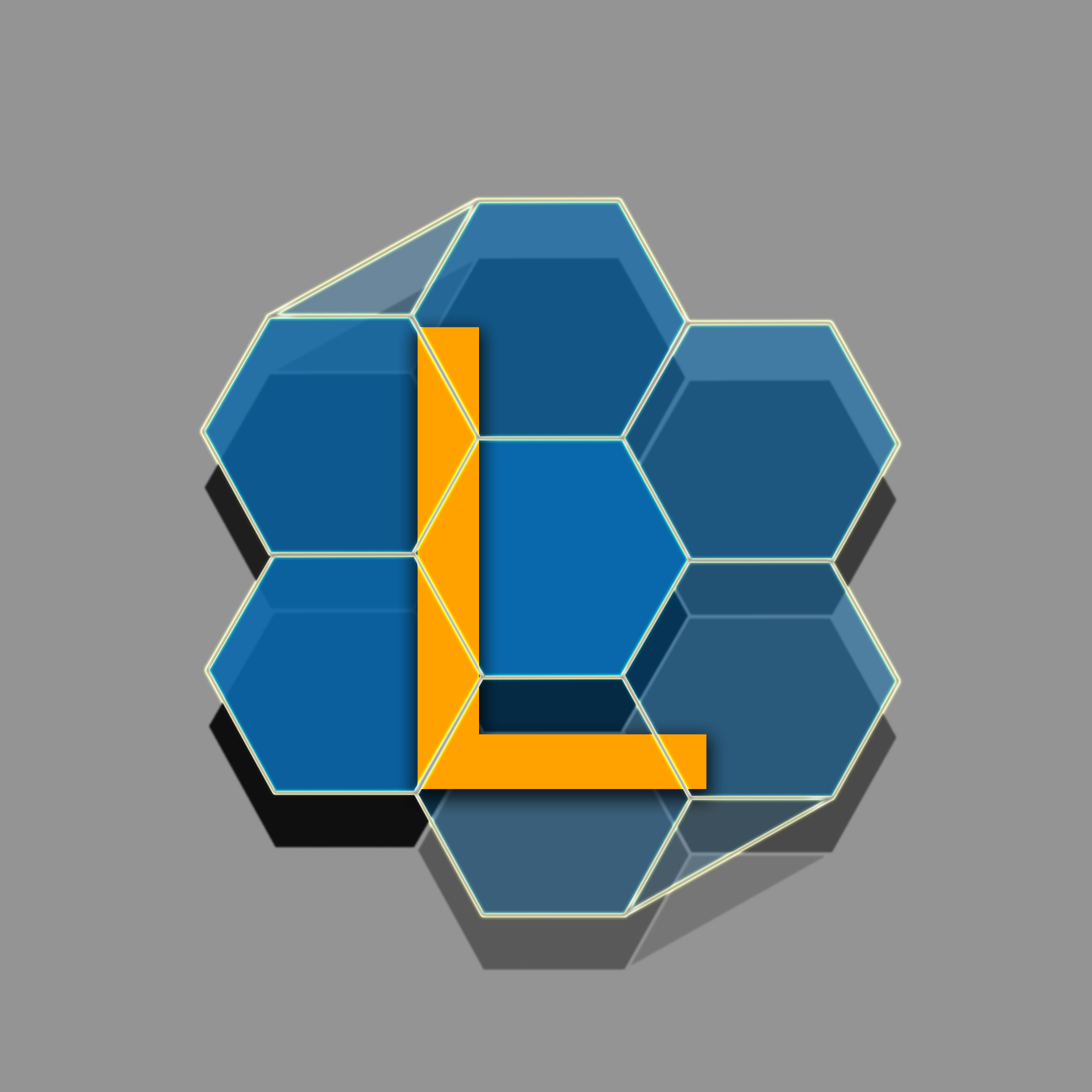
<style>
.page{position:relative;width:1092px;height:1092px;background:#949494}
.page>*{position:absolute;margin:0}
.t1{font:644.6px "ArialMT";color:#ffa200}
</style>
<div class="page">
<p class="t1" style="left:417px;top:327px;width:290px;height:462px">L</p>
</div>
